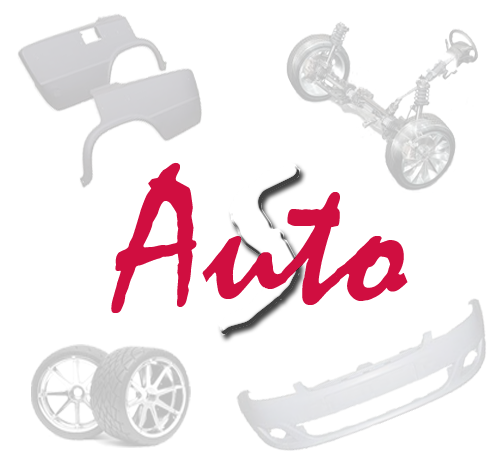
<style>
.page{position:relative;width:500px;height:470px;background:#ffffff}
.page>*{position:absolute;margin:0}
.t1{font:195.5px "Mistral";color:#d00e40}
</style>
<div class="page">
<p class="t1" style="left:111px;top:162px;width:297px;height:151px">Auto</p>
</div>
